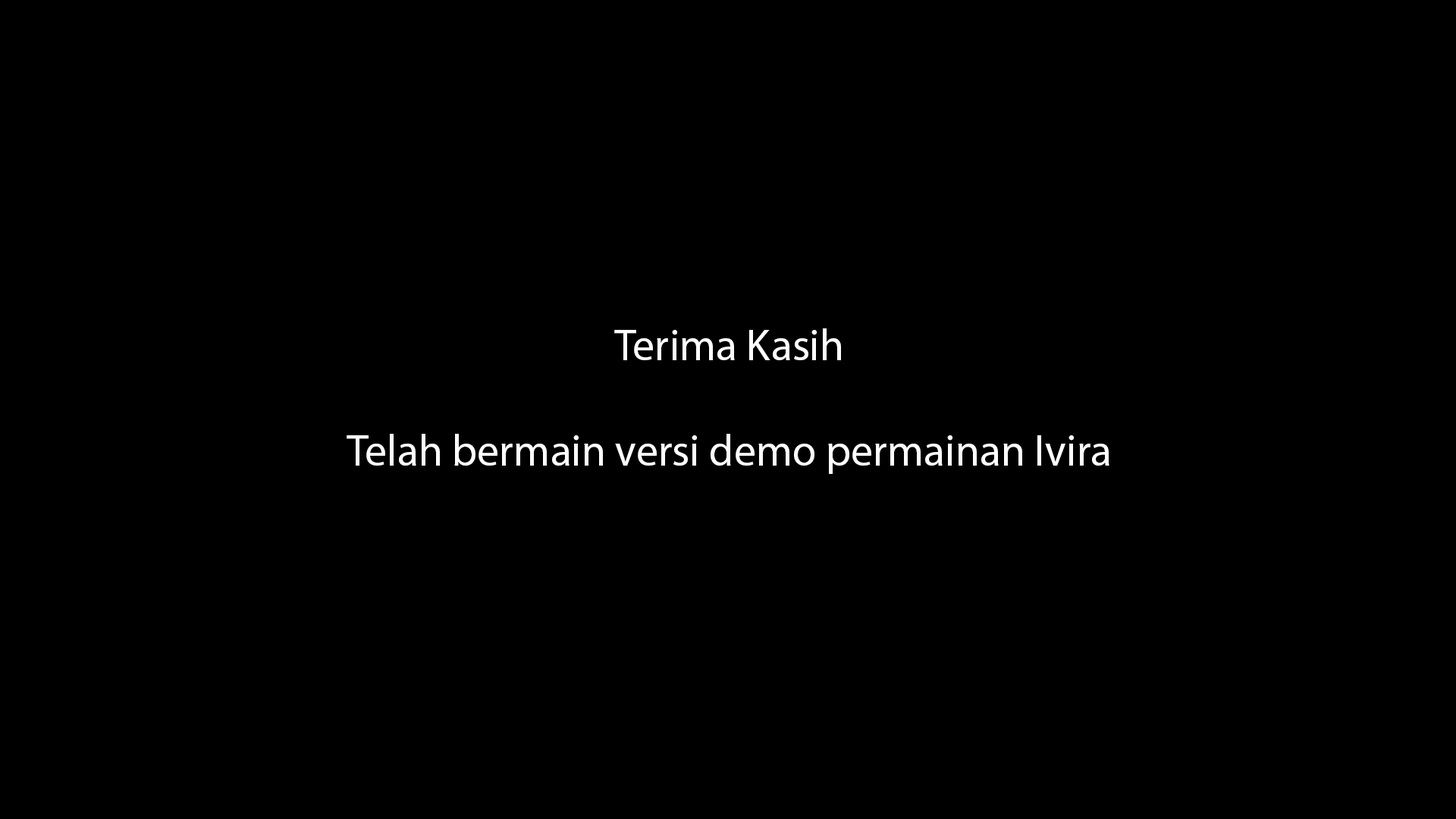
<style>
.page{position:relative;width:1456px;height:819px;background:#000000}
.page>*{position:absolute;margin:0}
.t1{font:43.8px "MyriadPro-Regular";color:#ffffff}
</style>
<div class="page">
<p class="t1" style="left:347px;top:328px;width:762px;height:146px;text-align:center">Terima Kasih<br><br>Telah bermain versi demo permainan Ivira</p>
</div>
